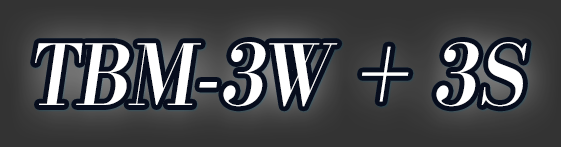
<style>
.page{position:relative;width:561px;height:147px}
.page>*{position:absolute;margin:0}
.t1{font:84px "KochoStd-Heavy";letter-spacing:0.01em;color:#ffffff;font-style:italic;scale:0.83 1}
</style>
<div class="page">
<p class="t1" style="left:35px;top:42px;width:492px;height:65px">TBM-3W + 3S</p>
</div>
